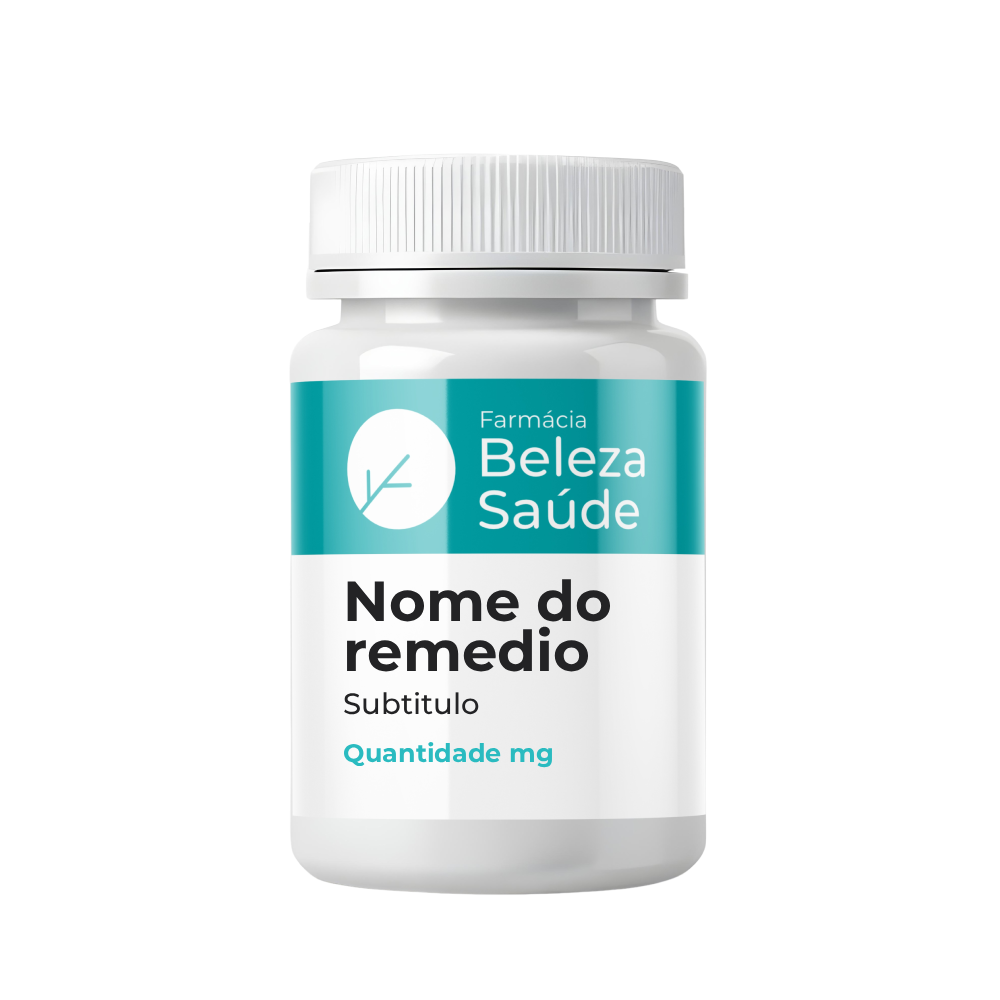
<style>
.page{position:relative;width:1000px;height:1000px;background:#ffffff}
.page>*{position:absolute;margin:0}
.t1{font:56.3px/50px "Montserrat-Bold";color:#232325}
.t2{font:29.2px "Montserrat-Medium";color:#232325}
.t3{font:25.5px "Montserrat-Bold";color:#2abbc0}
</style>
<div class="page">
<p class="t1" style="left:347px;top:579px;width:264px;height:93px">Nome do<br>remedio</p>
<p class="t2" style="left:344px;top:691px;width:135px;height:24px">Subtitulo</p>
<p class="t3" style="left:343px;top:741px;width:209px;height:27px">Quantidade mg</p>
</div>
